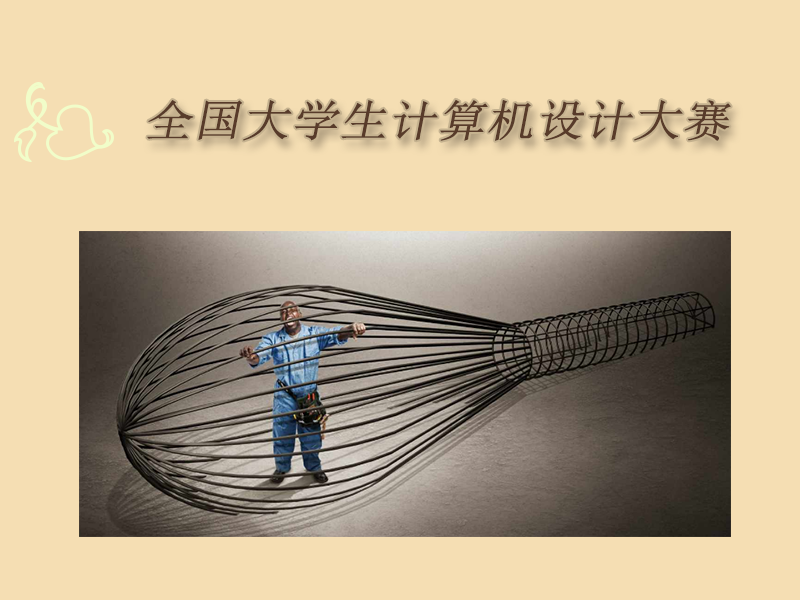
<style>
.page{position:relative;width:800px;height:600px;background:#f5deb3}
.page>*{position:absolute;margin:0}
.t1{font:43.5px "SimSun";color:#583b2a;font-weight:bold;font-style:italic;scale:1.09 1}
</style>
<div class="page">
<p class="t1" style="left:147px;top:99px;width:584px;height:42px">全国大学生计算机设计大赛</p>
</div>
